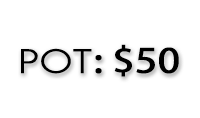
<style>
.page{position:relative;width:200px;height:118px;background:#ffffff}
.page>*{position:absolute;margin:0}
.t1{font:33.3px "AdobeHeitiStd-Regular";color:#000000;scale:1.21 1}
.t2{font:33.3px "JosefinSans";color:#000000;scale:1.21 1}
</style>
<div class="page">
<p class="t1" style="left:21px;top:44px;width:158px;height:33px"><span class="t2">POT</span>: $50</p>
</div>
